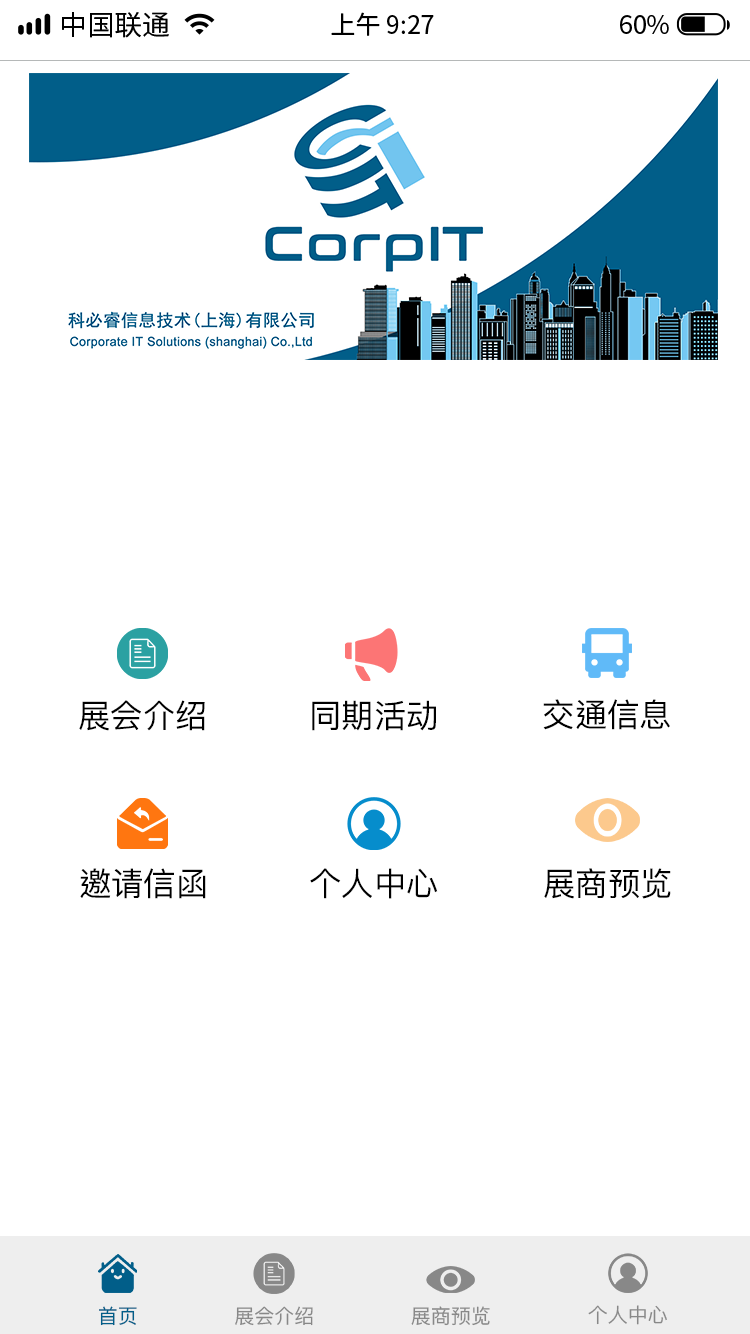
<style>
.page{position:relative;width:750px;height:1334px;background:#ffffff}
.page>*{position:absolute;margin:0}
.t1{font:27.8px "SourceHanSansCN-Regular";color:#000000}
.t2{font:25px "SourceHanSansCN-Regular";color:#000000}
.t3{font:32.3px "PingFangTC";color:#000000}
.t4{font:20px "PingFangTC";color:#015e89}
.t5{font:20px "PingFangTC";color:#888888}
</style>
<div class="page">
<p class="t1" style="left:62px;top:12px;width:107px;height:26px">中国联通</p>
<p class="t2" style="left:331px;top:12px;width:103px;height:24px">上午 9:27</p>
<p class="t2" style="left:620px;top:15px;width:49px;height:19px">60%</p>
<p class="t3" style="left:79px;top:700px;width:126px;height:31px">展会介绍</p>
<p class="t3" style="left:312px;top:700px;width:124px;height:31px">同期活动</p>
<p class="t3" style="left:543px;top:699px;width:127px;height:31px">交通信息</p>
<p class="t3" style="left:80px;top:868px;width:126px;height:31px">邀请信函</p>
<p class="t3" style="left:310px;top:868px;width:128px;height:31px">个人中心</p>
<p class="t3" style="left:544px;top:868px;width:127px;height:31px">展商预览</p>
<p class="t4" style="left:99px;top:1306px;width:38px;height:20px">首页</p>
<p class="t5" style="left:235px;top:1306px;width:78px;height:20px">展会介绍</p>
<p class="t5" style="left:411px;top:1306px;width:79px;height:20px">展商预览</p>
<p class="t5" style="left:588px;top:1305px;width:79px;height:20px">个人中心</p>
</div>
